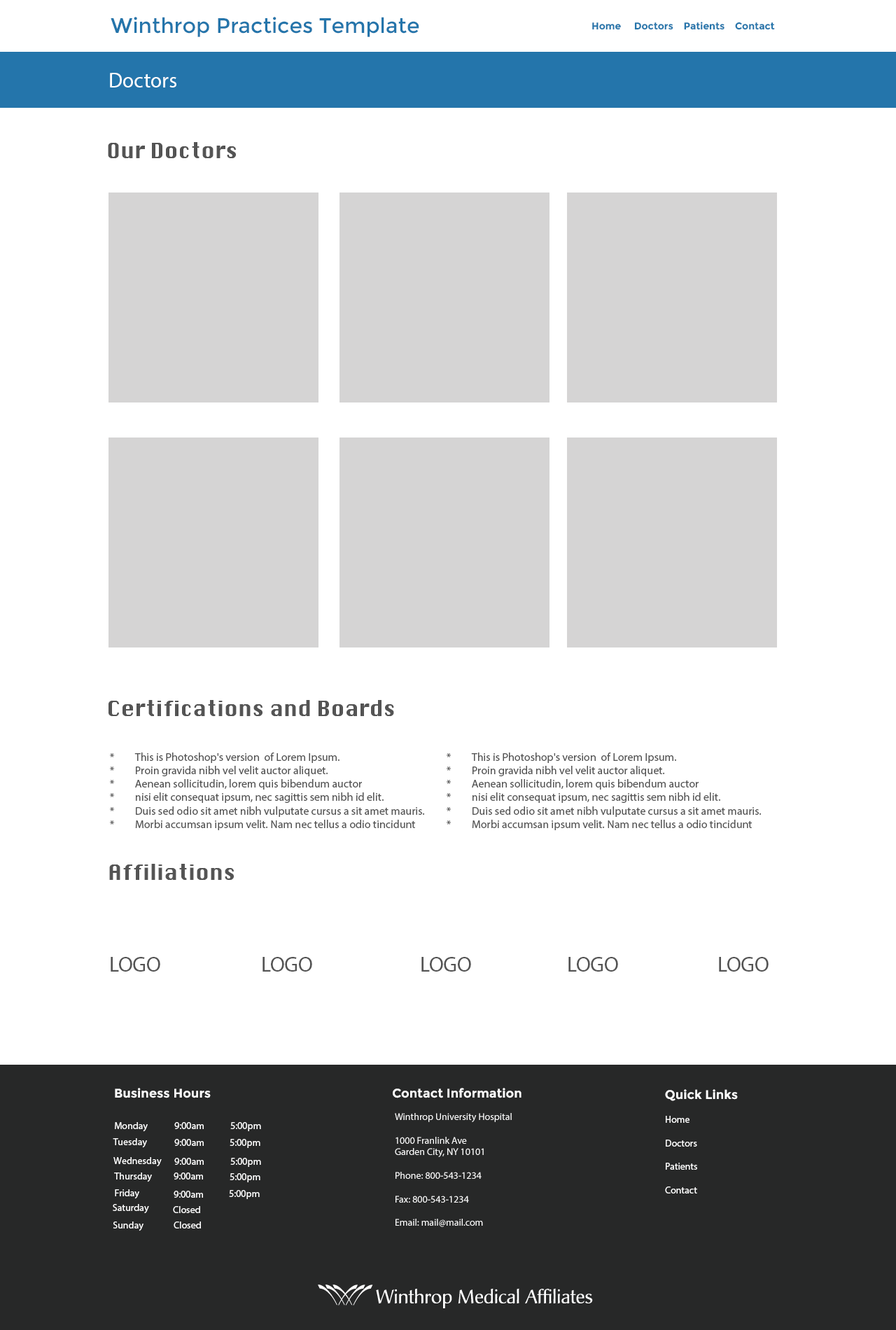
<style>
.page{position:relative;width:896px;height:1330px;background:#ffffff}
.page>*{position:absolute;margin:0}
.t1{font:21px "Montserrat-Regular";color:#2475ab}
.t2{font:9.8px "Montserrat-Bold";color:#2475ab}
.t3{font:21px "MyriadPro-Regular";color:#ffffff}
.t4{font:21px "Silom";color:#545454}
.t5{font:11.2px "MyriadPro-Regular";color:#545454}
.t6{font:21px "MyriadPro-Regular";color:#545454}
.t7{font:12.6px "Montserrat-Bold";color:#ffffff}
.t8{font:9.8px "MyriadPro-Regular";color:#ffffff}
</style>
<div class="page">
<p class="t1" style="left:111px;top:17px;width:308px;height:20px">Winthrop Practices Template</p>
<p class="t2" style="left:592px;top:22px;width:183px;height:8px">Home     Doctors    Patients    Contact</p>
<p class="t3" style="left:110px;top:73px;width:66px;height:15px">Doctors</p>
<p class="t4" style="left:108px;top:142px;width:128px;height:16px">Our Doctors</p>
<p class="t4" style="left:109px;top:700px;width:285px;height:16px">Certifications and Boards</p>
<p class="t5" style="left:110px;top:753px;width:315px;height:77px">* This is Photoshop's version  of Lorem Ipsum. <br>* Proin gravida nibh vel velit auctor aliquet. <br>* Aenean sollicitudin, lorem quis bibendum auctor<br>* nisi elit consequat ipsum, nec sagittis sem nibh id elit. <br>* Duis sed odio sit amet nibh vulputate cursus a sit amet mauris.<br>* Morbi accumsan ipsum velit. Nam nec tellus a odio tincidunt</p>
<p class="t5" style="left:447px;top:753px;width:315px;height:77px">* This is Photoshop's version  of Lorem Ipsum. <br>* Proin gravida nibh vel velit auctor aliquet. <br>* Aenean sollicitudin, lorem quis bibendum auctor<br>* nisi elit consequat ipsum, nec sagittis sem nibh id elit. <br>* Duis sed odio sit amet nibh vulputate cursus a sit amet mauris.<br>* Morbi accumsan ipsum velit. Nam nec tellus a odio tincidunt</p>
<p class="t4" style="left:109px;top:864px;width:125px;height:16px">Affiliations</p>
<p class="t6" style="left:111px;top:957px;width:49px;height:15px">LOGO</p>
<p class="t6" style="left:263px;top:957px;width:49px;height:15px">LOGO</p>
<p class="t6" style="left:422px;top:957px;width:49px;height:15px">LOGO</p>
<p class="t6" style="left:569px;top:957px;width:49px;height:15px">LOGO</p>
<p class="t6" style="left:719px;top:957px;width:50px;height:15px">LOGO</p>
<p class="t7" style="left:115px;top:1088px;width:96px;height:11px">Business Hours</p>
<p class="t7" style="left:393px;top:1088px;width:129px;height:11px">Contact Information</p>
<p class="t7" style="left:665px;top:1090px;width:73px;height:11px">Quick Links</p>
<p class="t8" style="left:395px;top:1113px;width:117px;height:114px">Winthrop University Hospital<br><br>1000 Franlink Ave <br>Garden City, NY 10101<br><br>Phone: 800-543-1234<br><br>Fax: 800-543-1234<br><br>Email: mail@mail.com</p>
<p class="t8" style="left:665px;top:1116px;width:32px;height:78px">Home<br><br>Doctors<br><br>Patients<br><br>Contact</p>
<p class="t8" style="left:115px;top:1122px;width:33px;height:10px">Monday</p>
<p class="t8" style="left:174px;top:1122px;width:30px;height:7px">9:00am</p>
<p class="t8" style="left:230px;top:1122px;width:31px;height:10px">5:00pm</p>
<p class="t8" style="left:113px;top:1139px;width:34px;height:9px">Tuesday</p>
<p class="t8" style="left:174px;top:1139px;width:30px;height:7px">9:00am</p>
<p class="t8" style="left:230px;top:1139px;width:30px;height:9px">5:00pm</p>
<p class="t8" style="left:113px;top:1157px;width:49px;height:10px">Wednesday</p>
<p class="t8" style="left:174px;top:1158px;width:30px;height:7px">9:00am</p>
<p class="t8" style="left:230px;top:1158px;width:31px;height:9px">5:00pm</p>
<p class="t8" style="left:114px;top:1173px;width:38px;height:10px">Thursday</p>
<p class="t8" style="left:174px;top:1173px;width:29px;height:7px">9:00am</p>
<p class="t8" style="left:230px;top:1174px;width:30px;height:9px">5:00pm</p>
<p class="t8" style="left:115px;top:1190px;width:24px;height:9px">Friday</p>
<p class="t8" style="left:174px;top:1191px;width:29px;height:7px">9:00am</p>
<p class="t8" style="left:229px;top:1190px;width:31px;height:9px">5:00pm</p>
<p class="t8" style="left:113px;top:1204px;width:36px;height:9px">Saturday</p>
<p class="t8" style="left:173px;top:1206px;width:27px;height:7px">Closed</p>
<p class="t8" style="left:113px;top:1222px;width:31px;height:10px">Sunday</p>
<p class="t8" style="left:174px;top:1222px;width:27px;height:7px">Closed</p>
</div>
